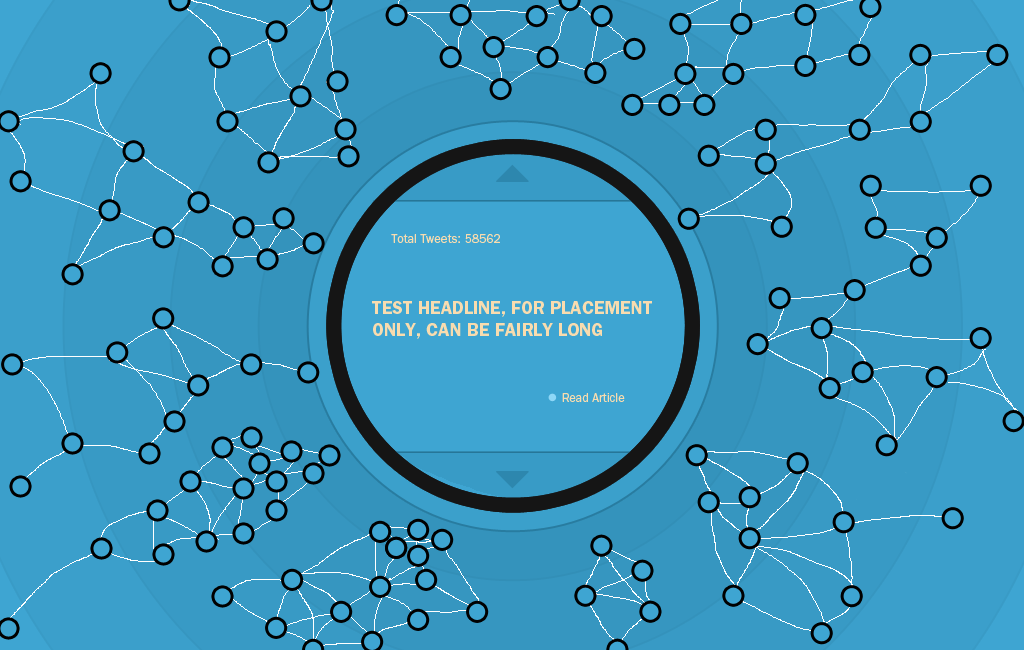
<style>
.page{position:relative;width:1024px;height:650px;background:#389ac5}
.page>*{position:absolute;margin:0}
.t1{font:18px "ITCFranklinGothicStd-Demi";color:#f8dcaf}
.t2{font:12px "ITCFranklinGothicStd-Book";color:#f8dcaf}
</style>
<div class="page">
<p class="t1" style="left:372px;top:301px;width:280px;height:38px">TEST HEADLINE, FOR PLACEMENT ONLY, CAN BE FAIRLY LONG</p>
<p class="t2" style="left:562px;top:393px;width:63px;height:9px">Read Article</p>
</div>
